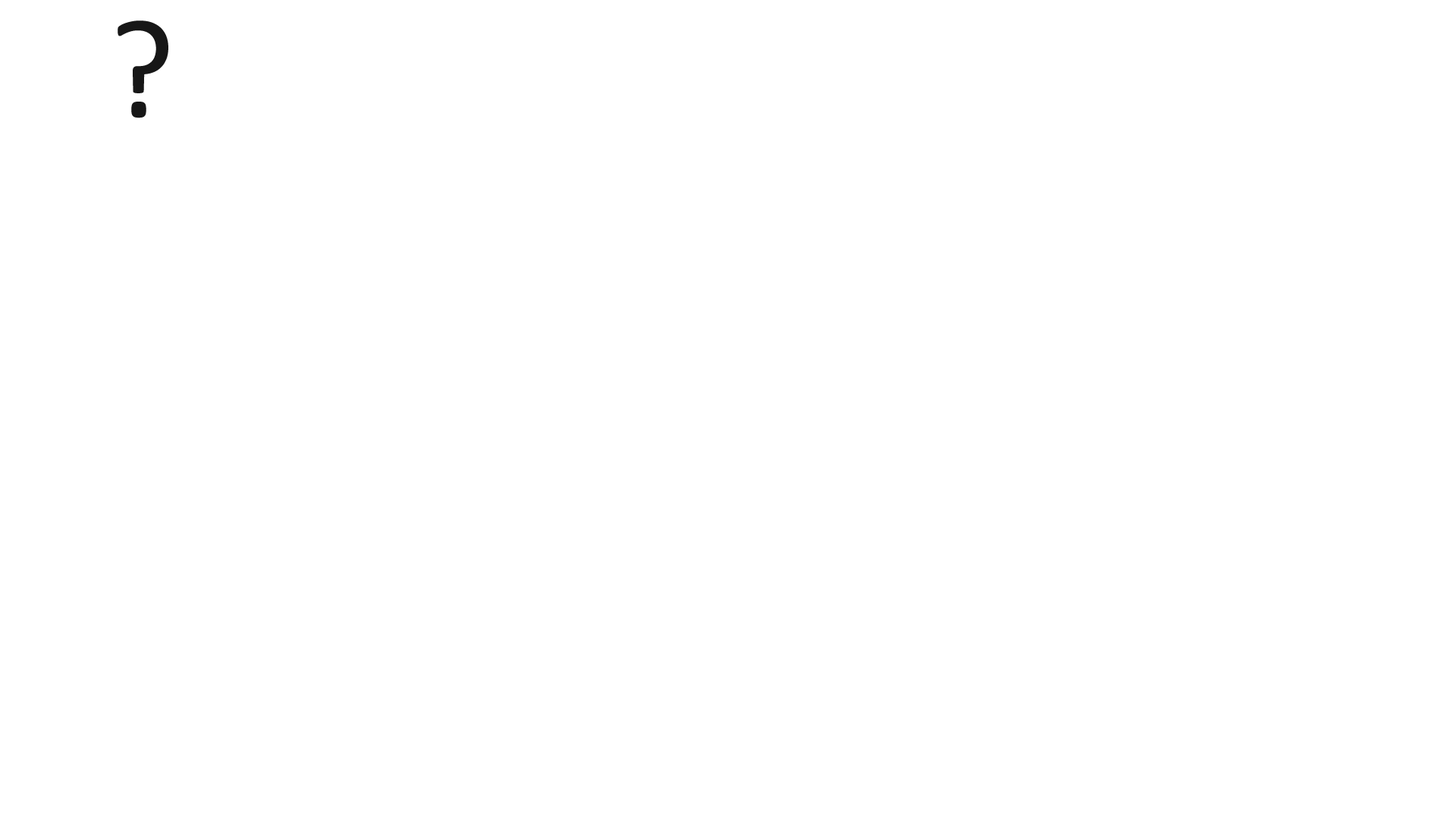
<style>
.page{position:relative;width:1456px;height:819px;background:#ffffff}
.page>*{position:absolute;margin:0}
.t1{font:143.2px "Calibri";letter-spacing:0.3em;color:#171717}
</style>
<div class="page">
<p class="t1" style="left:118px;top:20px;width:50px;height:98px">?</p>
</div>
